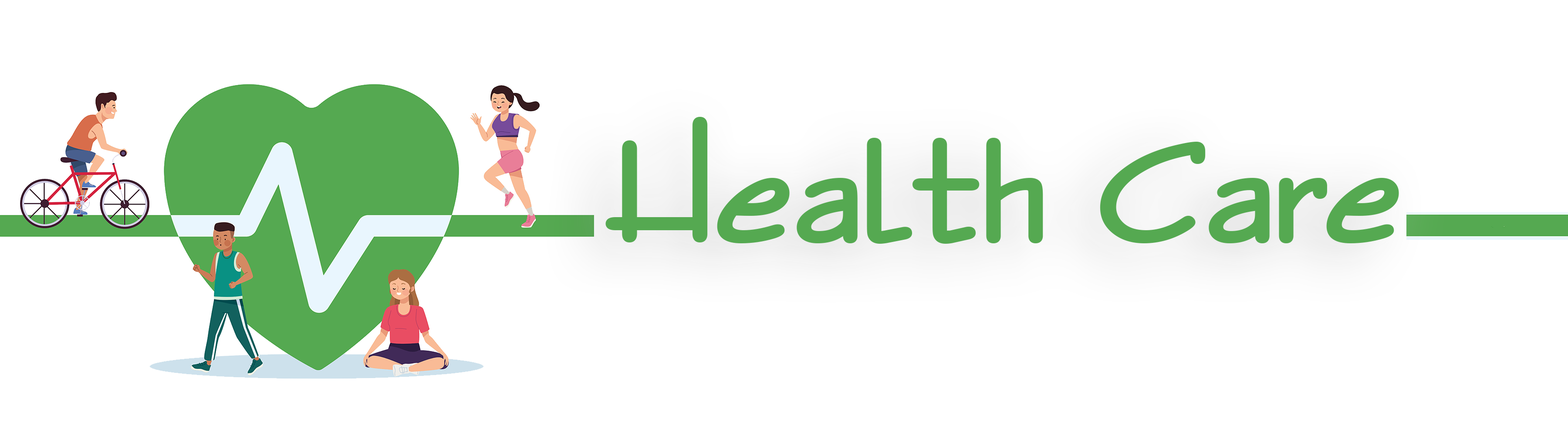
<style>
.page{position:relative;width:1568px;height:436px;background:#ffffff}
.page>*{position:absolute;margin:0}
.t1{font:147px "UVNThoiDai2";color:#55a951;font-weight:bold;scale:1.2 1}
</style>
<div class="page">
<p class="t1" style="left:605px;top:117px;width:794px;height:126px">Health Care</p>
</div>
